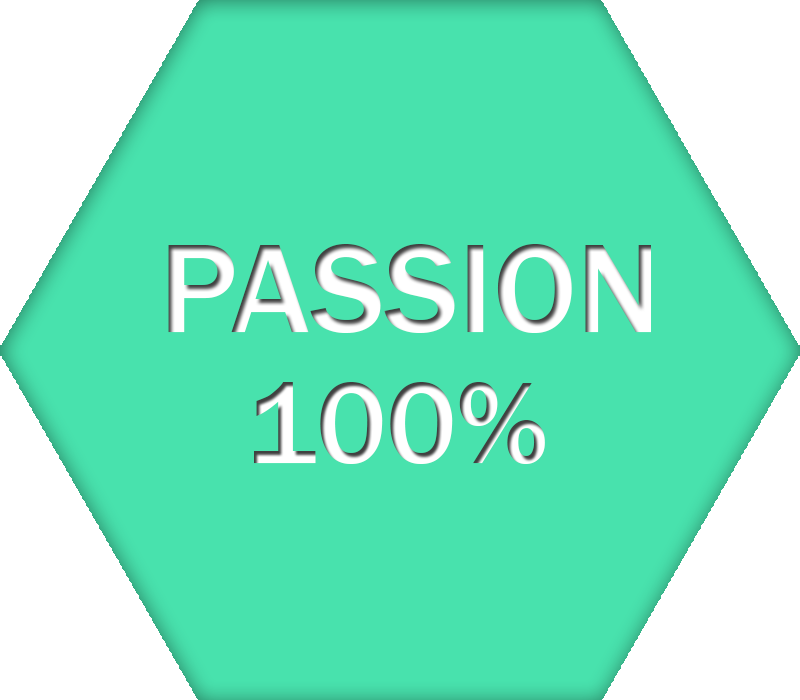
<style>
.page{position:relative;width:800px;height:700px;background:#48e2ad}
.page>*{position:absolute;margin:0}
.t1{font:130px "FranklinGothic-Medium";color:#ffffff}
.t2{font:120px "FranklinGothic-Medium"}
</style>
<div class="page">
<p class="t1" style="left:168px;top:244px;width:483px;height:89px">PASSION</p>
<p class="t2" style="left:254px;top:382px;width:291px;height:82px">100%</p>
</div>
